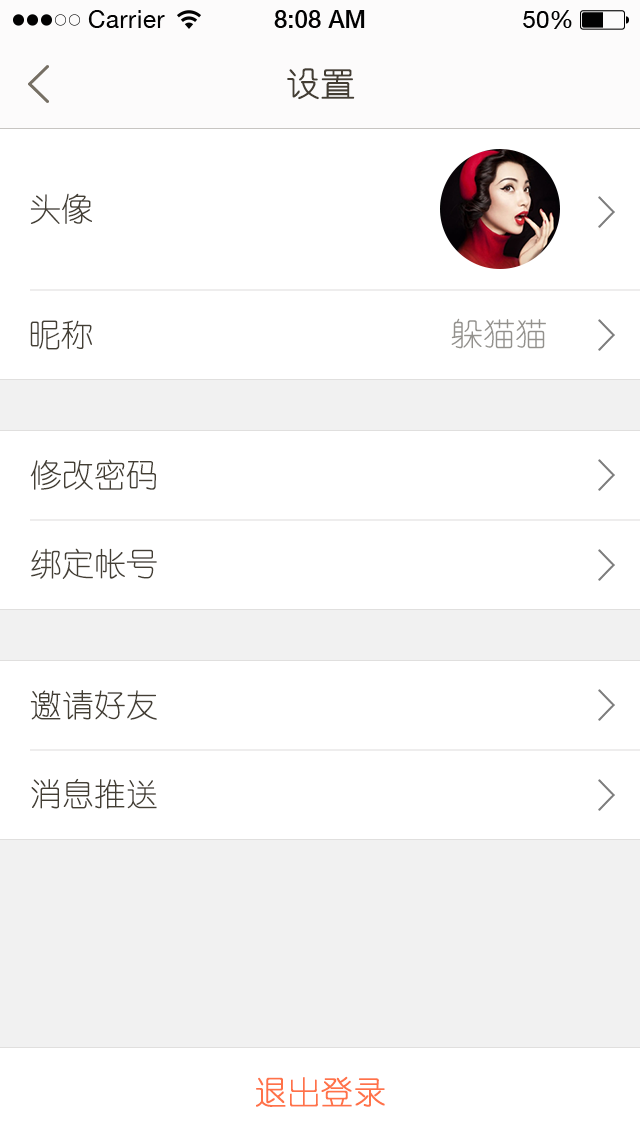
<style>
.page{position:relative;width:640px;height:1136px;background:#ffffff}
.page>*{position:absolute;margin:0}
.t1{font:34px "YouYuan";color:#433d33;text-transform:uppercase;font-weight:bold}
.t2{font:32px "YouYuan";color:#433e34}
.t3{font:32px "YouYuan";color:#93918d}
.t4{font:32px "YouYuan";color:#ff7248;font-weight:bold}
</style>
<div class="page">
<p class="t1" style="left:287px;top:68px;width:68px;height:32px">设置</p>
<p class="t2" style="left:30px;top:193px;width:62px;height:31px">头像</p>
<p class="t3" style="left:451px;top:318px;width:95px;height:31px">躲猫猫</p>
<p class="t2" style="left:30px;top:320px;width:62px;height:30px">昵称</p>
<p class="t2" style="left:30px;top:459px;width:126px;height:31px">修改密码</p>
<p class="t2" style="left:31px;top:548px;width:126px;height:31px">绑定帐号</p>
<p class="t2" style="left:30px;top:690px;width:127px;height:30px">邀请好友</p>
<p class="t2" style="left:31px;top:778px;width:126px;height:31px">消息推送</p>
<p class="t4" style="left:256px;top:1076px;width:129px;height:31px">退出登录</p>
</div>
